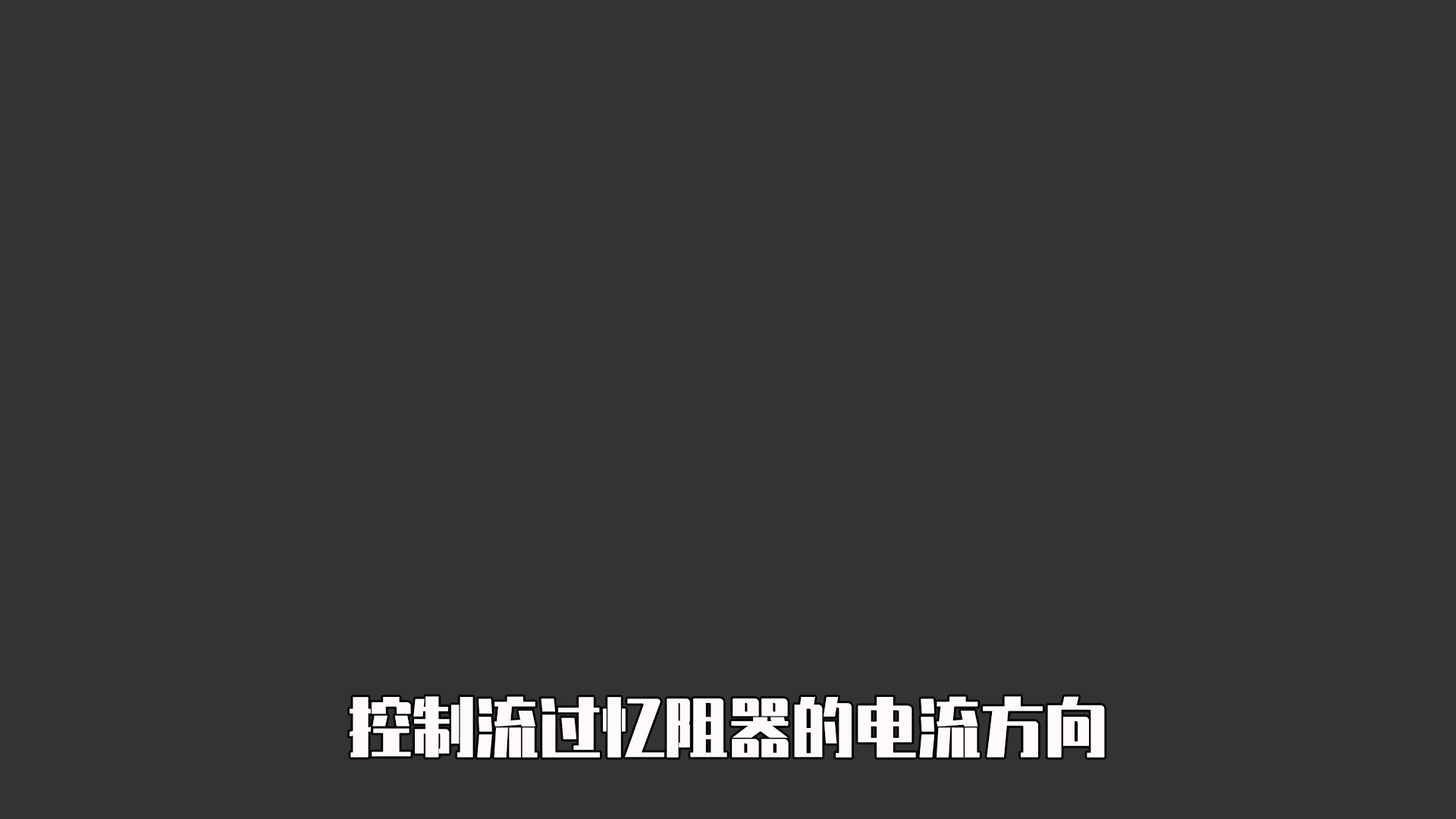
<style>
.page{position:relative;width:1456px;height:819px;background:#333333}
.page>*{position:absolute;margin:0}
.t1{font:63.2px "ZhenyanGB-Regular";color:#fefafa}
</style>
<div class="page">
<p class="t1" style="left:350px;top:696px;width:755px;height:62px">控制流过忆阻器的电流方向</p>
</div>
